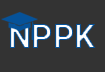
<style>
.page{position:relative;width:105px;height:72px;background:#333333}
.page>*{position:absolute;margin:0}
.t1{font:33.3px "Roboto-Bold"}
</style>
<div class="page">
<p class="t1" style="left:10px;top:24px;width:86px;height:24px">NPPK</p>
</div>
